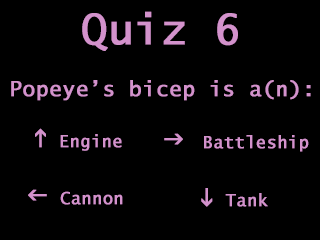
<style>
.page{position:relative;width:320px;height:240px;background:#000000}
.page>*{position:absolute;margin:0}
.t1{font:41.7px "LucidaSans-Typewriter";letter-spacing:0.01em;color:#d392cc;font-weight:bold}
.t2{font:20.8px "LucidaSans-Typewriter";letter-spacing:0.01em;color:#d392cc;font-weight:bold}
.t3{font:16.7px "LucidaSans-Typewriter";letter-spacing:0.01em;color:#d392cc;font-weight:bold}
.t4{font:25px "Wingdings3";letter-spacing:0.01em;color:#d392cc;font-weight:bold}
</style>
<div class="page">
<p class="t1" style="left:82px;top:11px;width:156px;height:40px">Quiz 6</p>
<p class="t2" style="left:11px;top:80px;width:300px;height:21px">Popeye’s bicep is a(n):</p>
<p class="t3" style="left:35px;top:128px;width:87px;height:23px"><span class="t4">h</span> Engine</p>
<p class="t3" style="left:164px;top:133px;width:145px;height:19px"><span class="t4">g </span>Battleship</p>
<p class="t3" style="left:28px;top:189px;width:95px;height:16px"><span class="t4">f</span> Cannon</p>
<p class="t3" style="left:201px;top:188px;width:67px;height:19px"><span class="t4">i </span>Tank</p>
</div>
